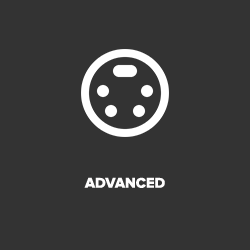
<style>
.page{position:relative;width:250px;height:250px;background:#333333}
.page>*{position:absolute;margin:0}
.t1{font:14.6px "ProximaNova-Extrabld";color:#fffefe}
</style>
<div class="page">
<p class="t1" style="left:84px;top:177px;width:81px;height:11px">ADVANCED</p>
</div>
